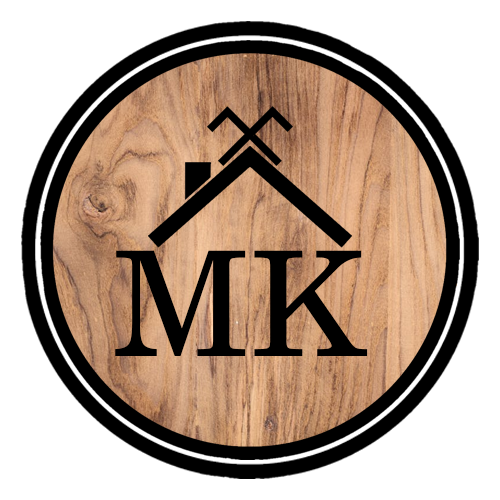
<style>
.page{position:relative;width:500px;height:500px;background:#ffffff}
.page>*{position:absolute;margin:0}
.t1{font:175.3px "FrankRuehlCLM-Medium";color:#000000}
</style>
<div class="page">
<p class="t1" style="left:115px;top:250px;width:131px;height:106px">M</p>
<p class="t1" style="left:254px;top:250px;width:114px;height:106px">K</p>
</div>
